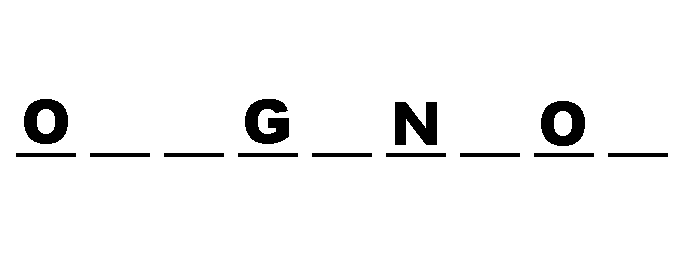
<style>
.page{position:relative;width:687px;height:262px;background:#ffffff}
.page>*{position:absolute;margin:0}
.t1{font:60px "Arial-Black";color:#000000}
</style>
<div class="page">
<p class="t1" style="left:24px;top:99px;width:44px;height:45px">O</p>
<p class="t1" style="left:245px;top:99px;width:44px;height:45px">G</p>
<p class="t1" style="left:395px;top:102px;width:42px;height:43px">N</p>
<p class="t1" style="left:541px;top:101px;width:44px;height:45px">O</p>
</div>
